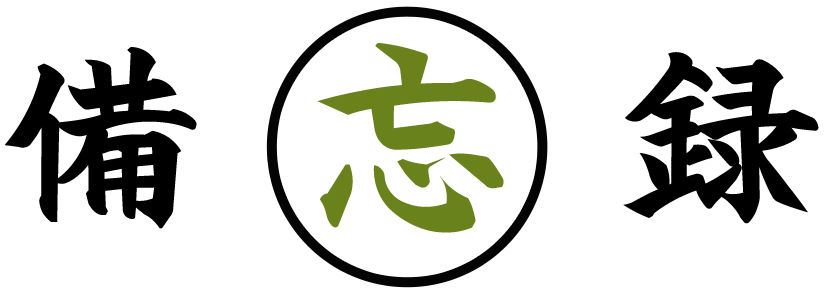
<style>
.page{position:relative;width:824px;height:296px;background:#ffffff}
.page>*{position:absolute;margin:0}
.t1{font:207.5px "DCLeiKaiSho-W5-WIN-RKSJ-H";color:#000000}
.t2{font:207.5px "DCLeiKaiSho-W5-WIN-RKSJ-H";color:#69821b}
</style>
<div class="page">
<p class="t1" style="left:4px;top:43px;width:815px;height:190px">備 <span class="t2">忘</span> 録</p>
</div>
